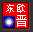
<style>
.page{position:relative;width:33px;height:32px;background:#f20000}
.page>*{position:absolute;margin:0}
.t1{font:10.4px "SimSun";color:#ffffff}
.t2{font:11.7px "SimSun";color:#ffffff}
</style>
<div class="page">
<p class="t1" style="left:6px;top:4px;width:19px;height:9px">东欧</p>
<p class="t2" style="left:16px;top:15px;width:11px;height:12px">晋</p>
</div>
